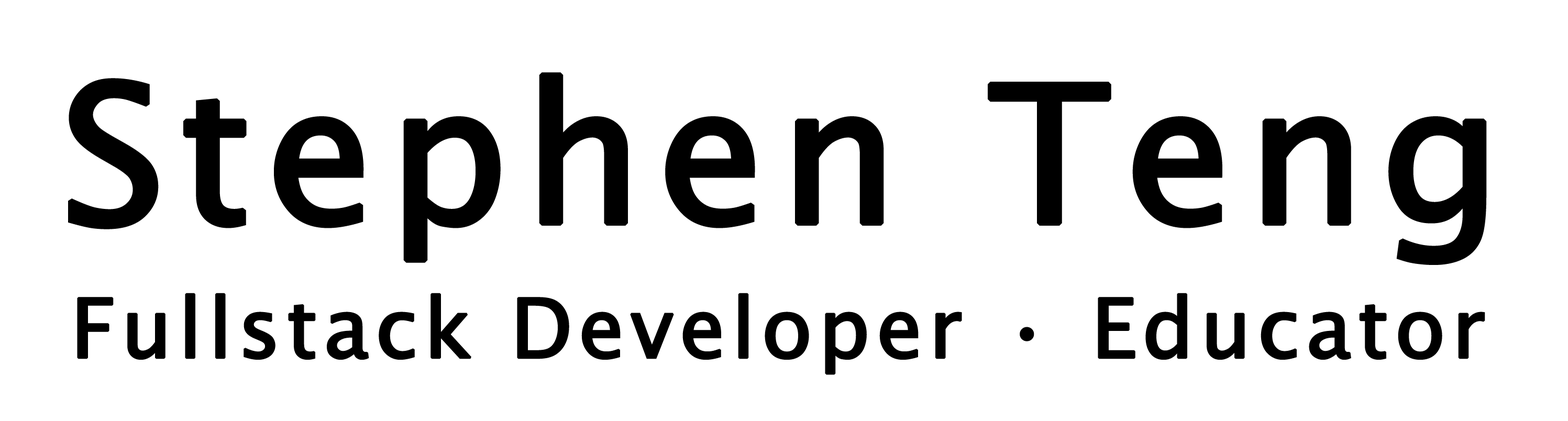
<style>
.page{position:relative;width:1568px;height:421px;background:#ffffff}
.page>*{position:absolute;margin:0}
.t1{font:192px "LucidaSans";letter-spacing:0.05em;color:#000000;font-weight:bold}
.t2{font:82.2px "LucidaSans";letter-spacing:0.05em;color:#000000;font-weight:bold}
</style>
<div class="page">
<p class="t1" style="left:68px;top:72px;width:1419px;height:193px">Stephen Teng</p>
<p class="t2" style="left:77px;top:293px;width:1408px;height:82px">Fullstack Developer • Educator</p>
</div>
